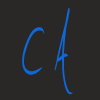
<style>
.page{position:relative;width:100px;height:100px;background:#292826}
.page>*{position:absolute;margin:0}
.t1{font:150px "Jellyka---Estrya's-Handwriting";color:#0d69db;scale:0.5 1}
</style>
<div class="page">
<p class="t1" style="left:54px;top:8px;width:19px;height:87px">A</p>
<p class="t1" style="left:22px;top:27px;width:23px;height:48px">C</p>
</div>
